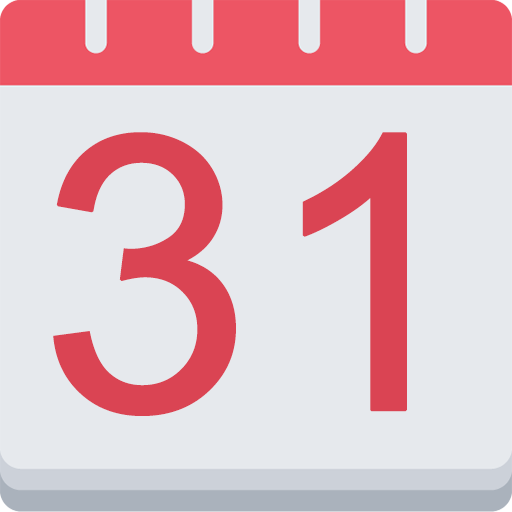
<style>
.page{position:relative;width:512px;height:512px;background:#e6e9ed}
.page>*{position:absolute;margin:0}
.t1{font:384px "ArialMT";color:#da4453;font-weight:bold}
</style>
<div class="page">
<p class="t1" style="left:53px;top:132px;width:354px;height:284px">31</p>
</div>
